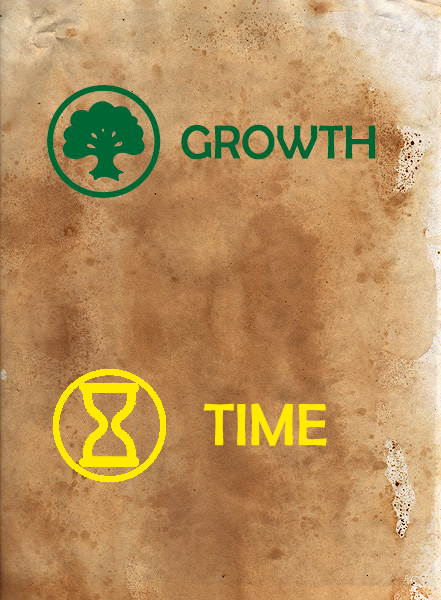
<style>
.page{position:relative;width:441px;height:600px}
.page>*{position:absolute;margin:0}
.t1{font:48px "BerlinSansFB-Reg";color:#006633}
.t2{font:60px "BerlinSansFB-Reg";color:#ffea00}
</style>
<div class="page">
<p class="t1" style="left:181px;top:124px;width:195px;height:36px">GROWTH</p>
<p class="t2" style="left:203px;top:403px;width:124px;height:43px">TIME</p>
</div>
